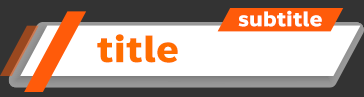
<style>
.page{position:relative;width:364px;height:97px;background:#ffffff}
.page>*{position:absolute;margin:0}
.t1{font:20.8px "Anakotmai-Bold";color:#ffffff}
.t2{font:37.5px "Anakotmai-Bold";color:#ff6d00}
</style>
<div class="page">
<p class="t1" style="left:238px;top:10px;width:84px;height:17px">subtitle</p>
<p class="t2" style="left:97px;top:34px;width:81px;height:29px">title</p>
</div>
